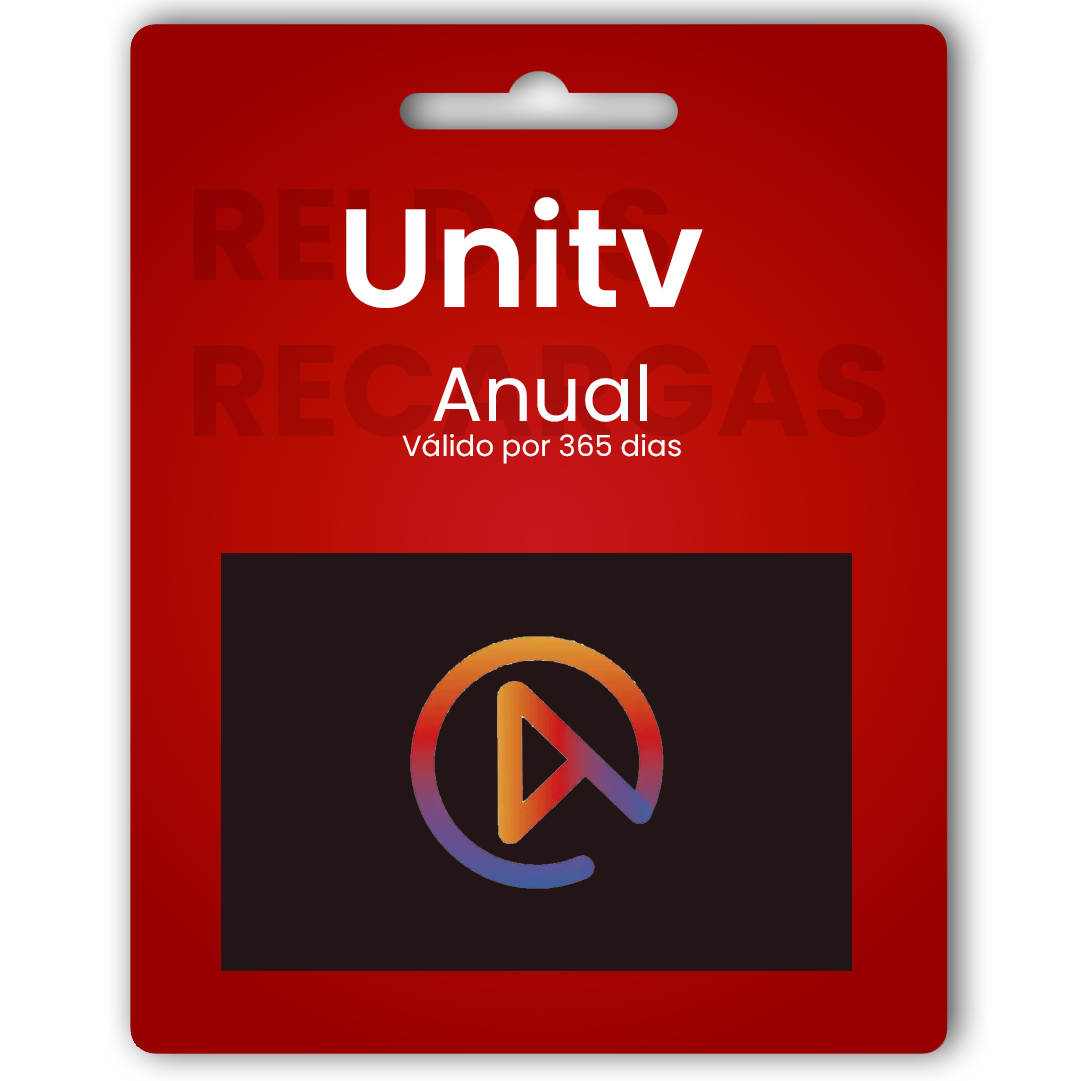
<style>
.page{position:relative;width:1081px;height:1081px}
.page>*{position:absolute;margin:0}
.t1{font:139.9px "Poppins-SemiBold";color:#ffffff}
.t2{font:29.1px "Poppins-Regular";color:#fffefe}
.t3{font:76.7px "Poppins-Regular";color:#fffefe}
</style>
<div class="page">
<p class="t1" style="left:346px;top:197px;width:357px;height:111px">Unitv</p>
<p class="t2" style="left:402px;top:364px;width:279px;height:100px;text-align:center"><span class="t3">Anual<br></span>Válido por 365 dias</p>
</div>
